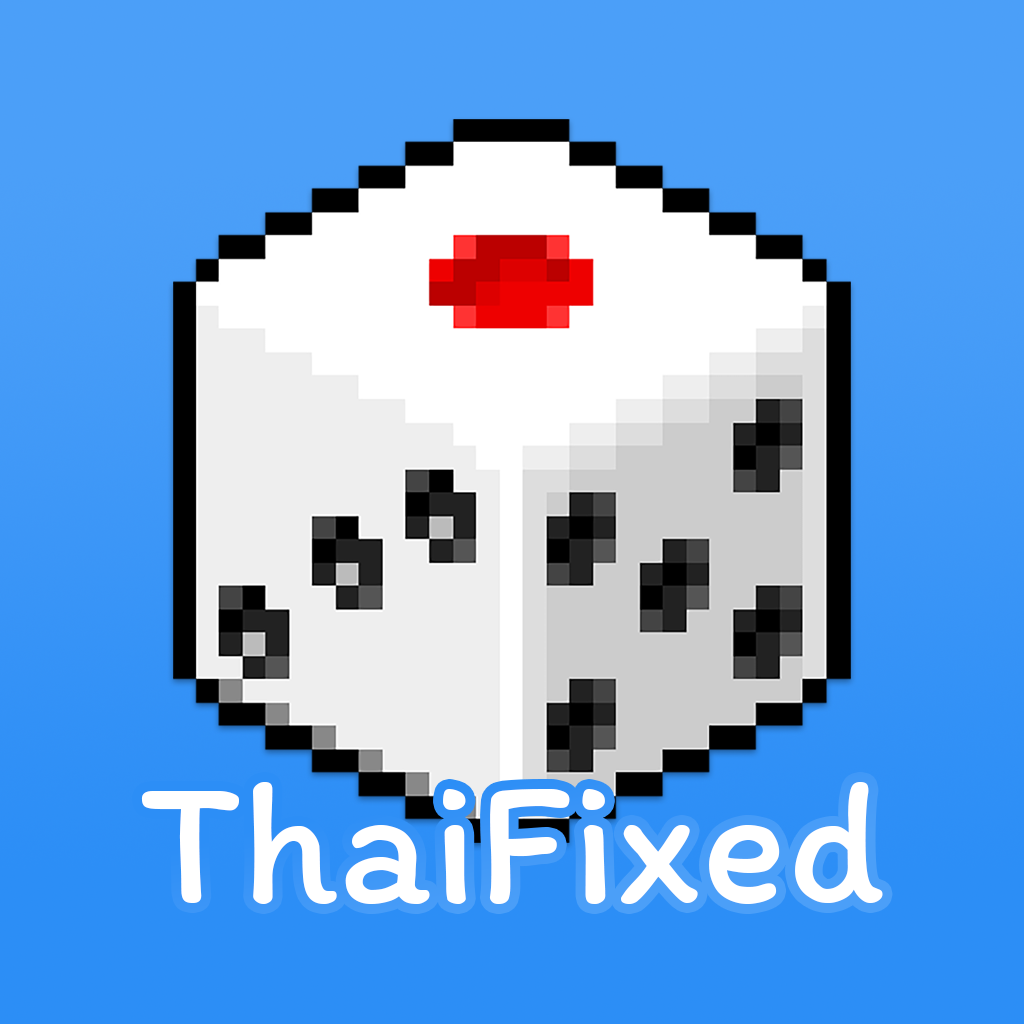
<style>
.page{position:relative;width:1024px;height:1024px}
.page>*{position:absolute;margin:0}
.t1{font:180px "Itim-Regular";color:#ffffff}
</style>
<div class="page">
<p class="t1" style="left:141px;top:782px;width:742px;height:122px">ThaiFixed</p>
</div>
